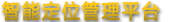
<style>
.page{position:relative;width:184px;height:22px}
.page>*{position:absolute;margin:0}
.t1{font:20px "ZpixEX2";letter-spacing:0.08em;font-weight:bold;scale:0.9 1}
</style>
<div class="page">
<p class="t1" style="left:2px;top:1px;width:158px;height:20px">智能定位管理平台</p>
</div>
